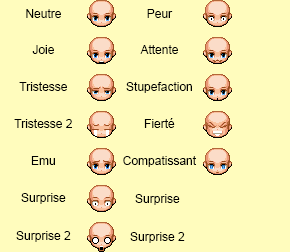
<style>
.page{position:relative;width:290px;height:252px;background:#fffcbd}
.page>*{position:absolute;margin:0}
.t1{font:12px "ArialMT";color:#000000}
</style>
<div class="page">
<p class="t1" style="left:26px;top:9px;width:35px;height:9px">Neutre</p>
<p class="t1" style="left:147px;top:9px;width:26px;height:9px">Peur</p>
<p class="t1" style="left:32px;top:45px;width:22px;height:9px">Joie</p>
<p class="t1" style="left:140px;top:45px;width:38px;height:9px">Attente</p>
<p class="t1" style="left:19px;top:82px;width:48px;height:9px">Tristesse</p>
<p class="t1" style="left:126px;top:82px;width:66px;height:11px">Stupefaction</p>
<p class="t1" style="left:14px;top:119px;width:58px;height:9px">Tristesse 2</p>
<p class="t1" style="left:144px;top:118px;width:31px;height:10px">Fierté</p>
<p class="t1" style="left:31px;top:156px;width:24px;height:9px">Emu</p>
<p class="t1" style="left:123px;top:156px;width:73px;height:11px">Compatissant</p>
<p class="t1" style="left:21px;top:193px;width:45px;height:11px">Surprise</p>
<p class="t1" style="left:135px;top:194px;width:45px;height:11px">Surprise</p>
<p class="t1" style="left:16px;top:231px;width:55px;height:11px">Surprise 2</p>
<p class="t1" style="left:130px;top:232px;width:55px;height:11px">Surprise 2</p>
</div>
